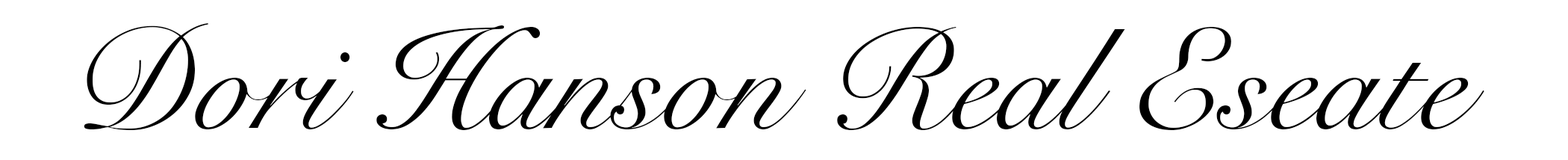
<style>
.page{position:relative;width:1568px;height:160px;background:#ffffff}
.page>*{position:absolute;margin:0}
.t1{font:141.9px "SnellRoundhand";color:#000000}
</style>
<div class="page">
<p class="t1" style="left:84px;top:23px;width:1400px;height:107px">Dori Hanson Real Eseate</p>
</div>
